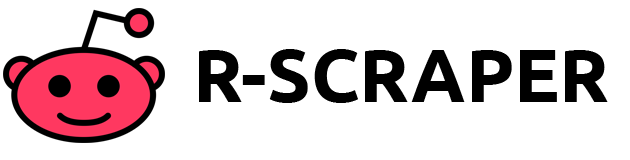
<style>
.page{position:relative;width:630px;height:160px;background:#ffffff}
.page>*{position:absolute;margin:0}
.t1{font:75px "Ubuntu-Bold";color:#000000}
</style>
<div class="page">
<p class="t1" style="left:199px;top:49px;width:409px;height:54px">R-SCRAPER</p>
</div>
